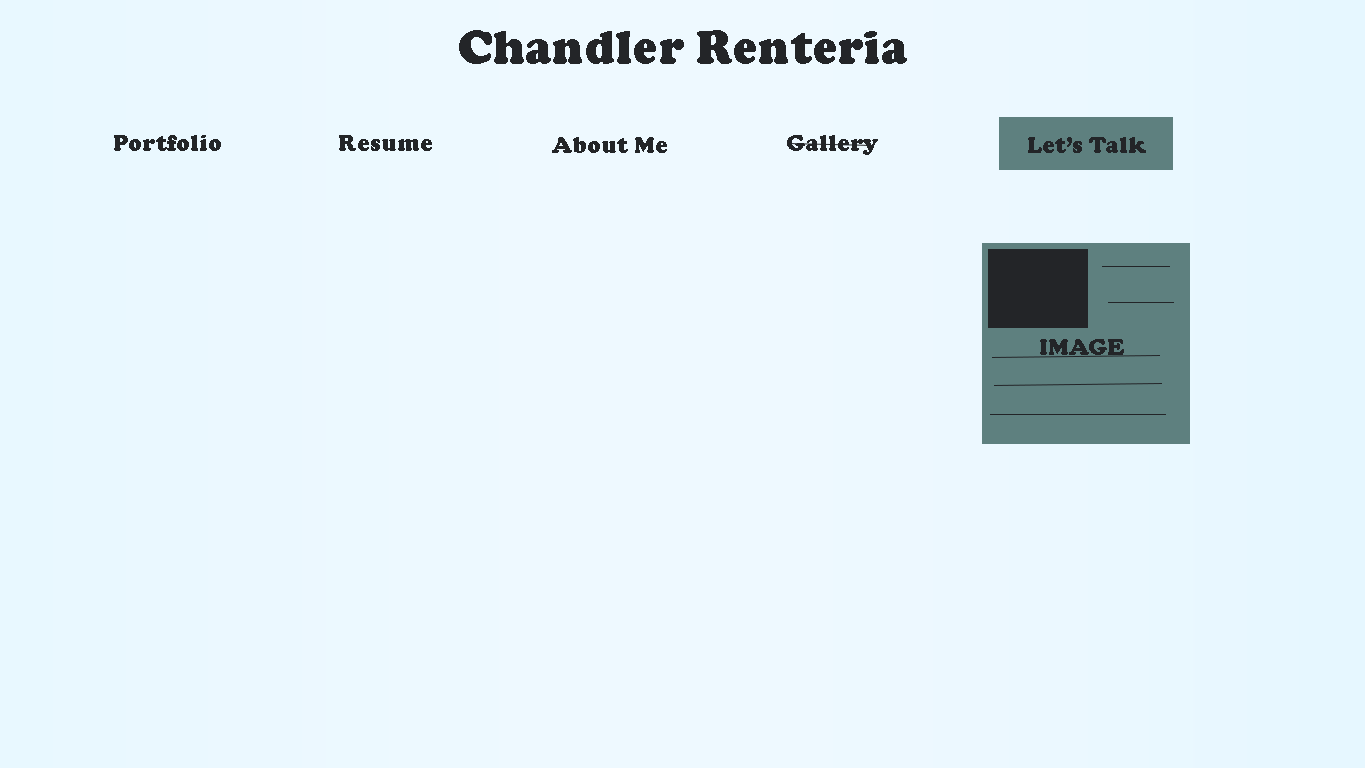
<style>
.page{position:relative;width:1366px;height:768px;background:#eef9ff}
.page>*{position:absolute;margin:0}
.t1{font:48px "CooperBlack";color:#232528}
.t2{font:24px "CooperBlack";color:#232528}
</style>
<div class="page">
<p class="t1" style="left:459px;top:30px;width:448px;height:34px">Chandler Renteria</p>
<p class="t2" style="left:114px;top:135px;width:107px;height:16px">Portfolio</p>
<p class="t2" style="left:339px;top:135px;width:93px;height:16px">Resume</p>
<p class="t2" style="left:552px;top:137px;width:115px;height:16px">About Me</p>
<p class="t2" style="left:787px;top:135px;width:91px;height:20px">Gallery</p>
<p class="t2" style="left:1028px;top:137px;width:118px;height:16px">Let’s Talk</p>
<p class="t2" style="left:1040px;top:339px;width:84px;height:16px">IMAGE</p>
</div>
